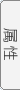
<style>
.page{position:relative;width:20px;height:90px;background:#f3f3f3}
.page>*{position:absolute;margin:0}
.t1{font:16px "MicrosoftJhengHeiRegular";letter-spacing:0.1em;color:#333333}
</style>
<div class="page">
<p class="t1" style="left:3px;top:28px;width:15px;height:32px;rotate:90deg">属性</p>
</div>
